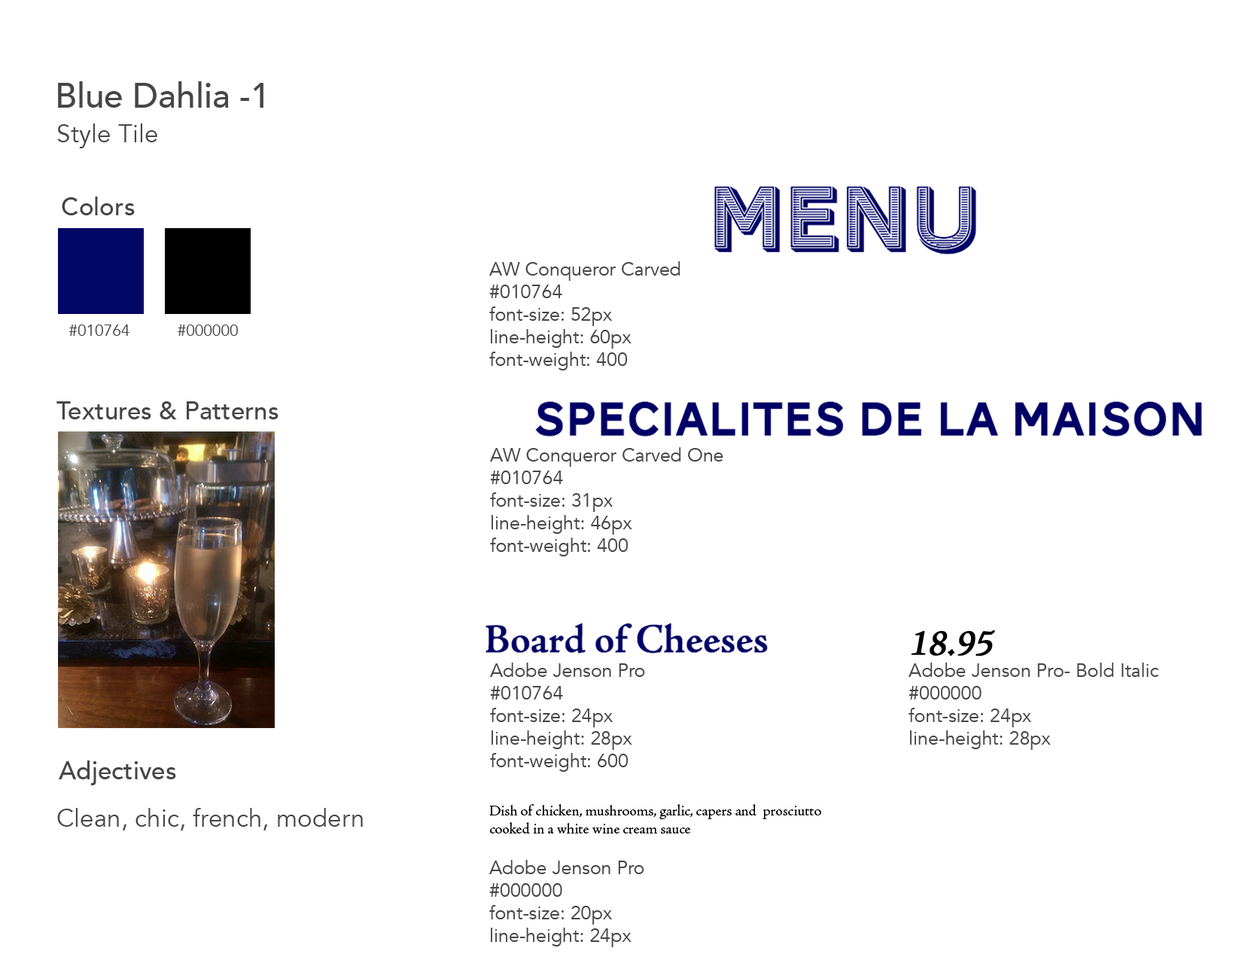
<style>
.page{position:relative;width:1242px;height:960px;background:#ffffff}
.page>*{position:absolute;margin:0}
.t1{font:34.5px "Avenir-Medium";color:#464646}
.t2{font:25.1px "Avenir-Book";color:#464646}
.t3{font:25.1px "Avenir-Medium";color:#464646}
.t4{font:18.8px "Avenir-Book";color:#464646}
.t5{font:15.7px "Avenir-Book";color:#464646}
.t6{font:36.1px "AJensonPro-Regular";color:#000000;font-weight:bold;font-style:italic}
.t7{font:15.1px/18.1px "AJensonPro-Regular";color:#000000}
</style>
<div class="page">
<p class="t1" style="left:58px;top:81px;width:206px;height:27px">Blue Dahlia -1</p>
<p class="t2" style="left:57px;top:123px;width:100px;height:25px">Style Tile</p>
<p class="t3" style="left:62px;top:196px;width:73px;height:19px">Colors</p>
<p class="t4" style="left:489px;top:261px;width:192px;height:109px">AW Conqueror Carved<br>#010764<br>font-size: 52px<br>line-height: 60px<br>font-weight: 400</p>
<p class="t5" style="left:69px;top:324px;width:60px;height:12px">#010764</p>
<p class="t5" style="left:178px;top:324px;width:60px;height:12px">#000000</p>
<p class="t3" style="left:56px;top:401px;width:223px;height:18px">Textures &amp; Patterns</p>
<p class="t4" style="left:490px;top:447px;width:234px;height:109px">AW Conqueror Carved One<br>#010764<br>font-size: 31px<br>line-height: 46px<br>font-weight: 400</p>
<p class="t4" style="left:909px;top:630px;width:250px;height:120px"><span class="t6">18.95<br></span>Adobe Jenson Pro- Bold Italic<br>#000000<br>font-size: 24px<br>line-height: 28px<br>font-weight: 600</p>
<p class="t4" style="left:490px;top:663px;width:155px;height:109px">Adobe Jenson Pro<br>#010764<br>font-size: 24px<br>line-height: 28px<br>font-weight: 600</p>
<p class="t3" style="left:59px;top:760px;width:117px;height:25px">Adjectives</p>
<p class="t2" style="left:57px;top:808px;width:306px;height:22px">Clean, chic, french, modern</p>
<p class="t7" style="left:489px;top:804px;width:332px;height:143px">Dish of chicken, mushrooms, garlic, capers and  prosciutto cooked in a white wine cream sauce<br><br><span class="t4">Adobe Jenson Pro<br>#000000<br>font-size: 20px<br>line-height: 24px<br>font-weight: 400</span></p>
</div>
